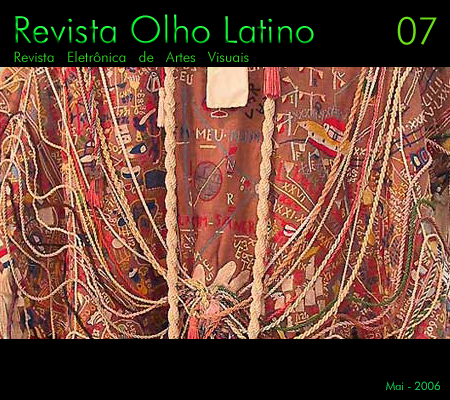
<style>
.page{position:relative;width:450px;height:400px;background:#000000}
.page>*{position:absolute;margin:0}
.t1{font:37.5px "FuturaBT-Light"}
.t2{font:37.5px "FuturaBT-Light";color:#6dde1a}
.t3{font:14.4px "FuturaBT-Light";color:#30df23}
.t4{font:11.4px "FuturaBT-Light";color:#11b748}
</style>
<div class="page">
<p class="t1" style="left:15px;top:14px;width:299px;height:30px">Revista Olho Latino</p>
<p class="t2" style="left:397px;top:16px;width:40px;height:29px">07</p>
<p class="t3" style="left:14px;top:51px;width:235px;height:11px">Revista   Eletrônica   de   Artes   Visuais</p>
<p class="t4" style="left:386px;top:381px;width:54px;height:9px">Mai - 2006</p>
</div>
